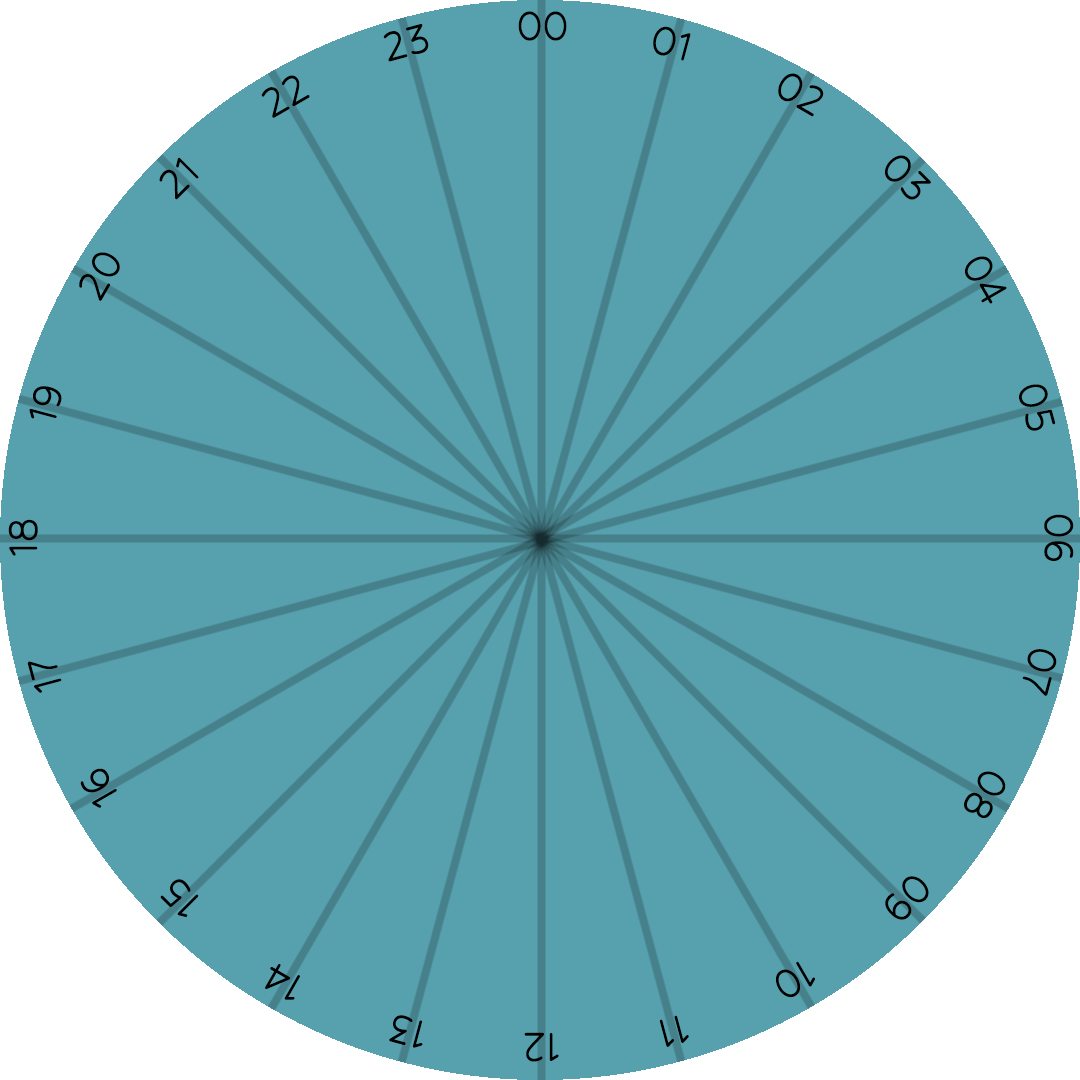
<style>
.page{position:relative;width:1080px;height:1080px;background:#57a1ae}
.page>*{position:absolute;margin:0}
.t1{font:52.3px "Hubballi-Regular";letter-spacing:-0.025em;color:#000000;scale:0.92 1}
</style>
<div class="page">
<p class="t1" style="left:518px;top:11px;width:49px;height:30px">00</p>
<p class="t1" style="left:383px;top:24px;width:46px;height:38px;rotate:-15deg">23</p>
<p class="t1" style="left:653px;top:26px;width:38px;height:35px;rotate:15deg">01</p>
<p class="t1" style="left:261px;top:75px;width:49px;height:43px;rotate:-30deg">22</p>
<p class="t1" style="left:778px;top:73px;width:46px;height:44px;rotate:30deg">02</p>
<p class="t1" style="left:159px;top:157px;width:40px;height:43px;rotate:-45deg">21</p>
<p class="t1" style="left:885px;top:155px;width:46px;height:45px;rotate:45deg">03</p>
<p class="t1" style="left:79px;top:252px;width:41px;height:49px;rotate:-60deg">20</p>
<p class="t1" style="left:965px;top:256px;width:42px;height:48px;rotate:60deg">04</p>
<p class="t1" style="left:29px;top:386px;width:33px;height:33px;rotate:-75deg">19</p>
<p class="t1" style="left:1019px;top:384px;width:37px;height:47px;rotate:75deg">05</p>
<p class="t1" style="left:8px;top:519px;width:30px;height:37px;rotate:-90deg">18</p>
<p class="t1" style="left:1044px;top:514px;width:30px;height:47px;rotate:90deg">06</p>
<p class="t1" style="left:1022px;top:649px;width:35px;height:47px;rotate:105deg">07</p>
<p class="t1" style="left:27px;top:661px;width:35px;height:32px;rotate:-105deg">17</p>
<p class="t1" style="left:80px;top:768px;width:37px;height:40px;rotate:-120deg">16</p>
<p class="t1" style="left:964px;top:771px;width:42px;height:47px;rotate:120deg">08</p>
<p class="t1" style="left:160px;top:879px;width:39px;height:38px;rotate:-135deg">15</p>
<p class="t1" style="left:885px;top:876px;width:44px;height:44px;rotate:135deg">09</p>
<p class="t1" style="left:265px;top:964px;width:35px;height:36px;rotate:-150deg">14</p>
<p class="t1" style="left:776px;top:961px;width:39px;height:37px;rotate:150deg">10</p>
<p class="t1" style="left:389px;top:1015px;width:34px;height:33px;rotate:-165deg">13</p>
<p class="t1" style="left:659px;top:1015px;width:30px;height:32px;rotate:165deg">11</p>
<p class="t1" style="left:524px;top:1032px;width:35px;height:30px;rotate:-180deg">12</p>
</div>
